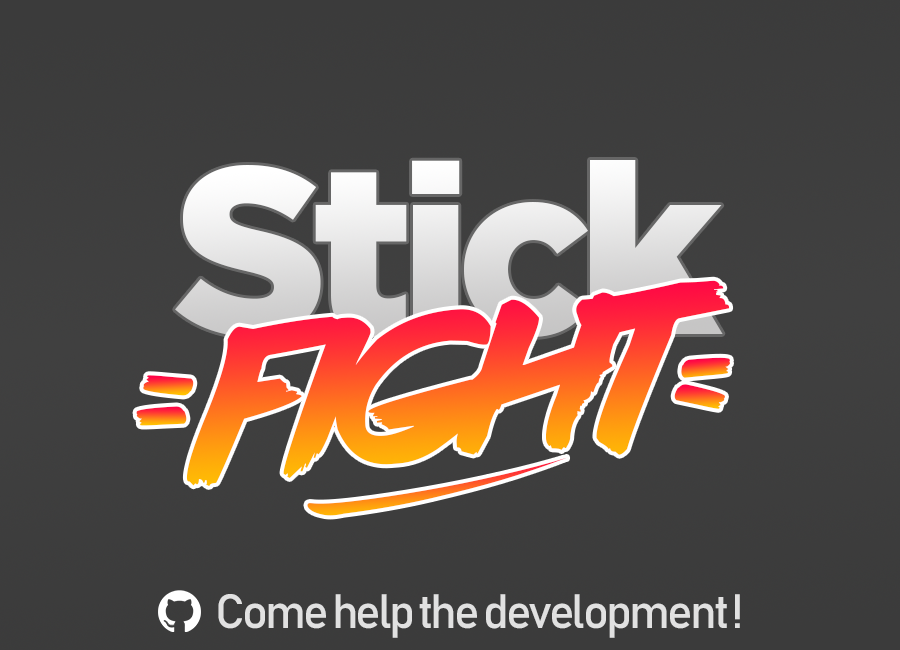
<style>
.page{position:relative;width:900px;height:650px}
.page>*{position:absolute;margin:0}
.t1{font:237.9px "Gotham-Black";letter-spacing:-0.06em}
.t2{font:182.9px "lazer84";letter-spacing:-0.06em}
.t3{font:182.7px "lazer84";letter-spacing:-0.06em}
.t4{font:230.6px "Dancing-in-the-Rainbow";letter-spacing:-0.06em;scale:2.21 1}
.t5{font:47.6px "Bahnschrift";letter-spacing:-0.06em;color:#e1e1e1}
</style>
<div class="page">
<p class="t1" style="left:175px;top:160px;width:548px;height:177px">Stick</p>
<p class="t2" style="left:186px;top:280px;width:544px;height:206px;rotate:-5deg">FIGHT</p>
<p class="t3" style="left:681px;top:357px;width:49px;height:21px;rotate:113deg">,</p>
<p class="t3" style="left:143px;top:375px;width:51px;height:21px;rotate:-57deg">,</p>
<p class="t3" style="left:674px;top:384px;width:51px;height:25px;rotate:131deg">,</p>
<p class="t2" style="left:136px;top:406px;width:51px;height:20px;rotate:59deg">,</p>
<p class="t4" style="left:307px;top:457px;width:260px;height:59px;rotate:-11deg">_</p>
<p class="t5" style="left:218px;top:594px;width:522px;height:44px">Come help the development !</p>
</div>
